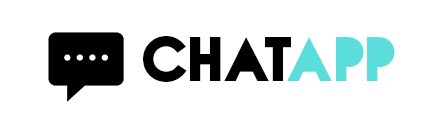
<style>
.page{position:relative;width:436px;height:116px;background:#ffffff}
.page>*{position:absolute;margin:0}
.t1{font:78px "NovaSOLID-SOLID";letter-spacing:0.075em;color:#000000}
.t2{font:78px "NovaSOLID-SOLID";letter-spacing:0.075em;color:#5bdddb}
</style>
<div class="page">
<p class="t1" style="left:143px;top:36px;width:252px;height:46px">CHAT<span class="t2">APP</span></p>
</div>
